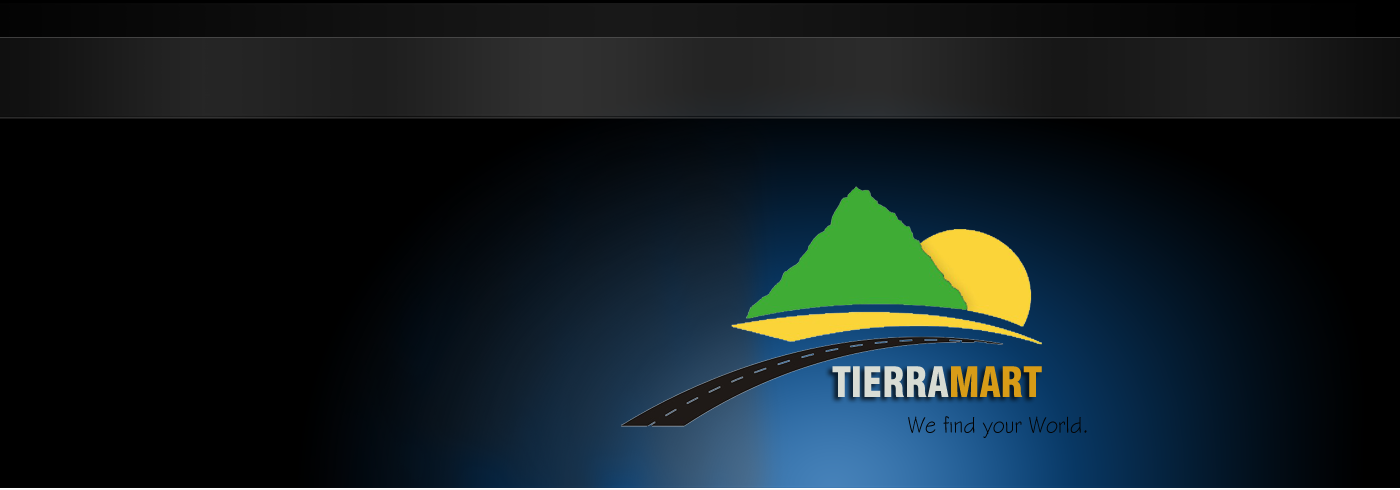
<style>
.page{position:relative;width:1400px;height:490px;background:#000000}
.page>*{position:absolute;margin:0}
.t1{font:41px "Swiss721BT-BlackCondensed";color:#e4e4d8;scale:0.94 1}
.t2{font:41px "Swiss721BT-BlackCondensed";color:#e4a111;scale:0.94 1}
.t3{font:24px "StylusBT";color:#030303;scale:0.87 1}
</style>
<div class="page">
<p class="t1" style="left:832px;top:366px;width:210px;height:31px;opacity:0.94">TIERRA<span class="t2">MART</span></p>
<p class="t3" style="left:908px;top:416px;width:179px;height:22px">We find your World.</p>
</div>
